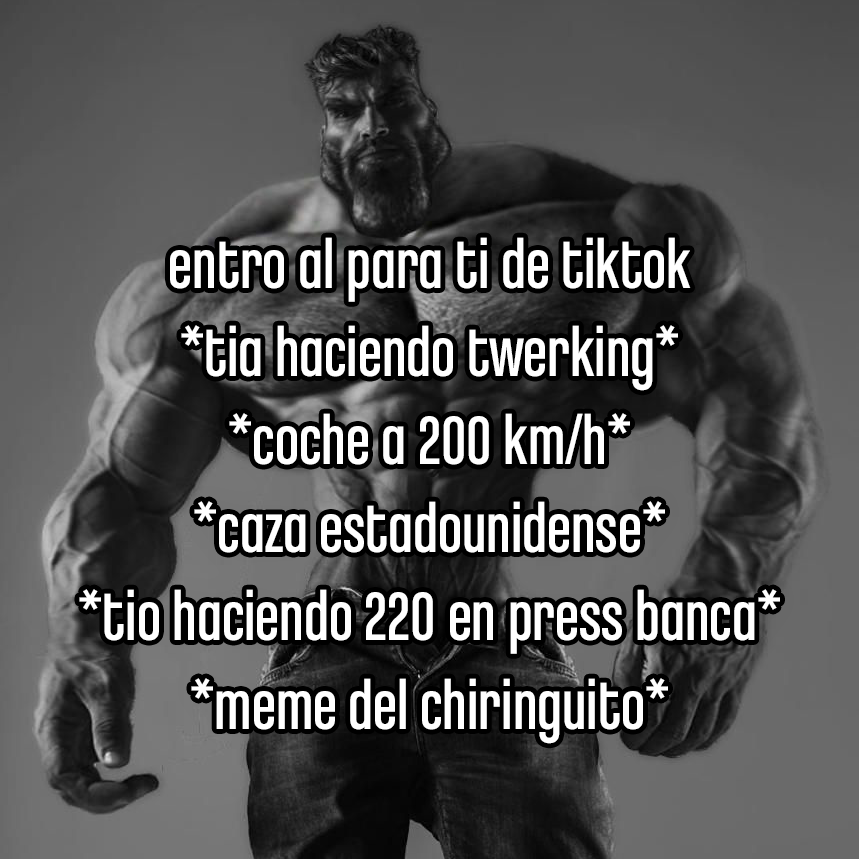
<style>
.page{position:relative;width:859px;height:859px}
.page>*{position:absolute;margin:0}
.t1{font:72.8px "ChaletComprime-CologneEighty";color:#ffffff}
</style>
<div class="page">
<p class="t1" style="left:79px;top:237px;width:701px;height:507px;text-align:center">entro al para ti de tiktok<br>*tia haciendo twerking*<br>*coche a 200 km/h*<br>*caza estadounidense*<br>*tio haciendo 220 en press banca*<br>*meme del chiringuito*</p>
</div>
